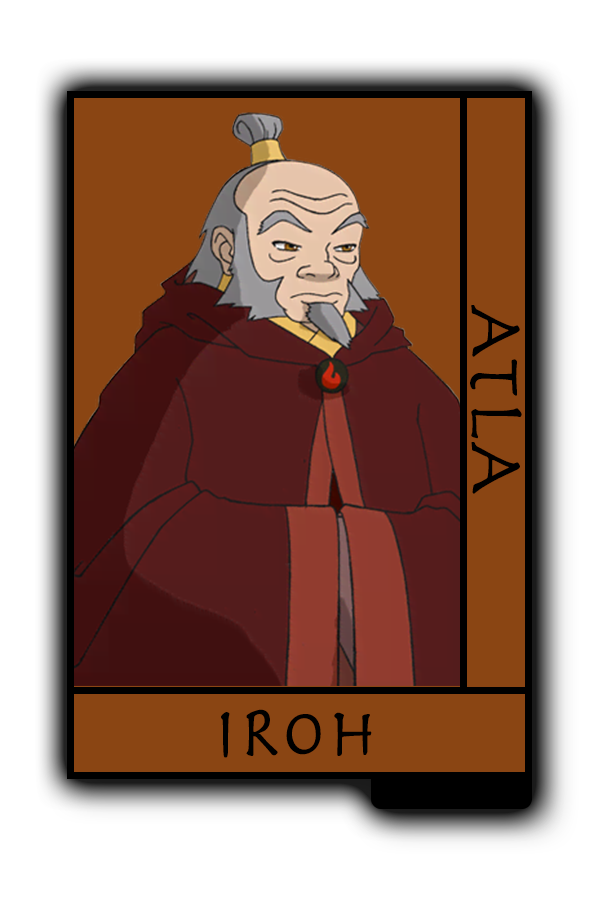
<style>
.page{position:relative;width:600px;height:900px;background:#8a4513}
.page>*{position:absolute;margin:0}
.t1{font:80.7px "Herculanum";color:#000000}
.t2{font:75px "Herculanum";color:#000000}
</style>
<div class="page">
<p class="t1" style="left:470px;top:305px;width:52px;height:189px;rotate:90deg">ATLA</p>
<p class="t2" style="left:221px;top:709px;width:151px;height:49px">IROH</p>
</div>
